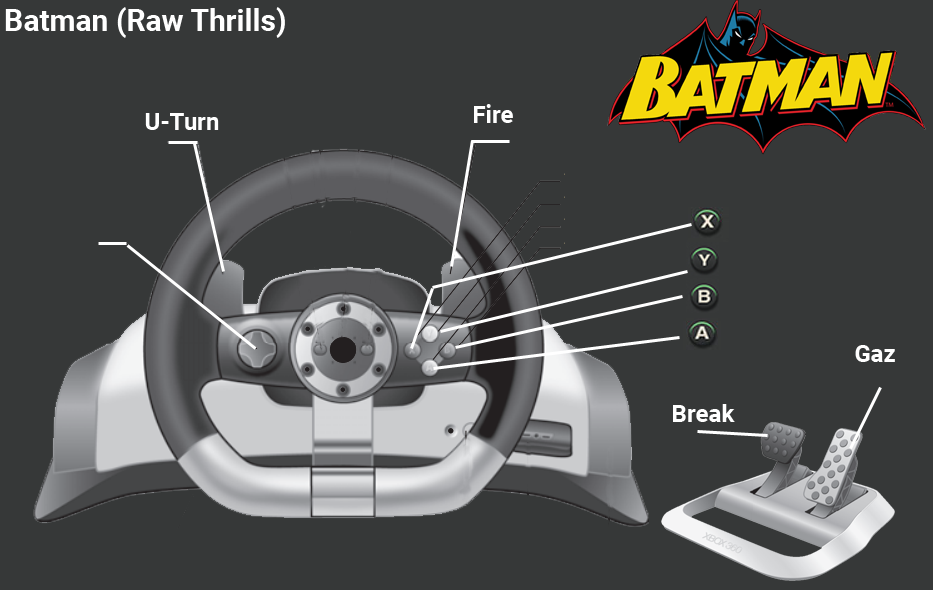
<style>
.page{position:relative;width:933px;height:590px;background:#363838}
.page>*{position:absolute;margin:0}
.t1{font:30px "Roboto-Bold";color:#ffffff}
.t2{font:24px "Roboto-Bold";color:#ffffff}
</style>
<div class="page">
<p class="t1" style="left:5px;top:7px;width:280px;height:31px">Batman (Raw Thrills)</p>
<p class="t2" style="left:145px;top:113px;width:74px;height:17px">U-Turn</p>
<p class="t2" style="left:474px;top:104px;width:39px;height:19px">Fire</p>
<p class="t2" style="left:855px;top:345px;width:40px;height:17px">Gaz</p>
<p class="t2" style="left:673px;top:404px;width:62px;height:18px">Break</p>
</div>
